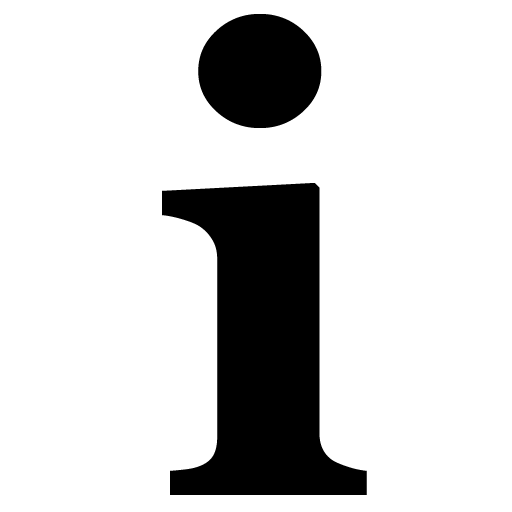
<style>
.page{position:relative;width:512px;height:512px;background:#ffffff}
.page>*{position:absolute;margin:0}
.t1{font:637.2px "Georgia-Bold";color:#000000}
</style>
<div class="page">
<p class="t1" style="left:162px;top:14px;width:205px;height:481px">i</p>
</div>
